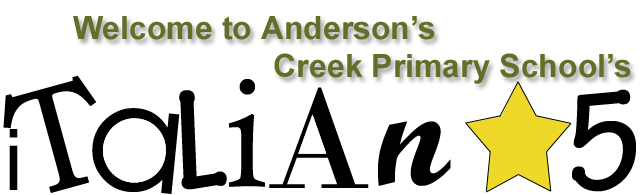
<style>
.page{position:relative;width:640px;height:195px;background:#ffffff}
.page>*{position:absolute;margin:0}
.t1{font:32px "Arial-BoldMT";color:#636e29}
</style>
<div class="page">
<p class="t1" style="left:73px;top:16px;width:558px;height:68px;text-align:center">Welcome to Anderson’s<br>           Creek Primary School’s</p>
</div>
